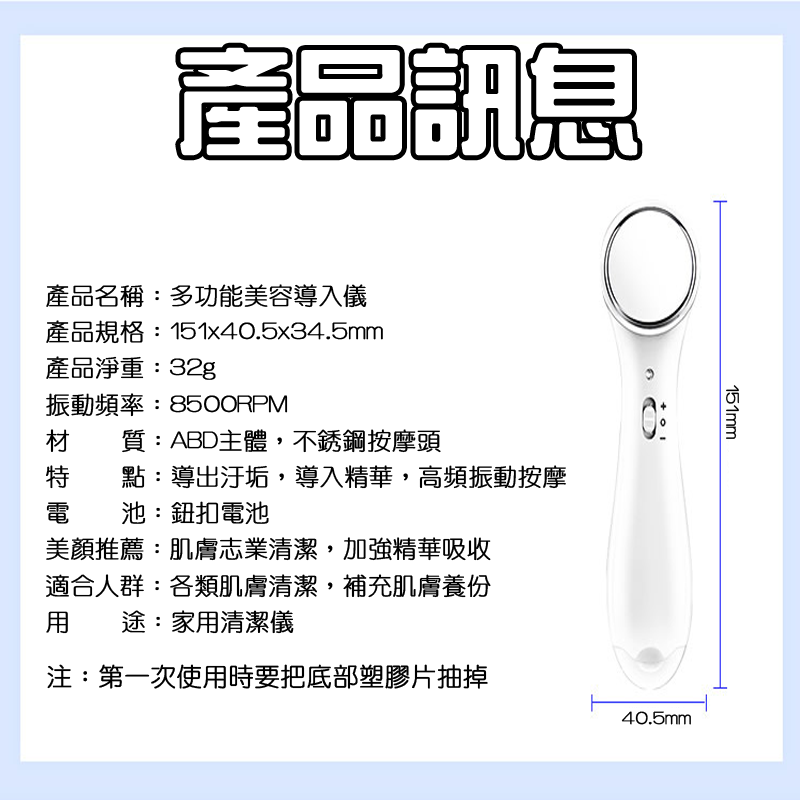
<style>
.page{position:relative;width:800px;height:800px;background:#ffffff}
.page>*{position:absolute;margin:0}
.t1{font:113.4px "HanWangZonYi";color:#ffffff;font-weight:bold}
.t2{font:24.1px "HanWangYenLight";color:#000000;font-weight:bold}
.t3{font:18px "HanWangYenLight";color:#000000;font-weight:bold}
.t4{font:25.3px "HanWangYenLight";color:#000000;font-weight:bold}
</style>
<div class="page">
<p class="t1" style="left:180px;top:47px;width:458px;height:109px">產品訊息</p>
<p class="t2" style="left:46px;top:284px;width:520px;height:350px">產品名稱：多功能美容導入儀<br>產品規格：151x40.5x34.5mm<br>產品淨重：32g<br>振動頻率：8500RPM<br>材    質：ABD主體，不銹鋼按摩頭<br>特    點：導出汙垢，導入精華，高頻振動按摩<br>電    池：鈕扣電池<br>美顏推薦：肌膚志業清潔，加強精華吸收<br>適合人群：各類肌膚清潔，補充肌膚養份<br>用    途：家用清潔儀</p>
<p class="t3" style="left:726px;top:385px;width:13px;height:54px;rotate:90deg">151mm</p>
<p class="t4" style="left:47px;top:664px;width:441px;height:25px">注：第一次使用時要把底部塑膠片抽掉</p>
<p class="t3" style="left:621px;top:711px;width:70px;height:14px">40.5mm</p>
</div>
